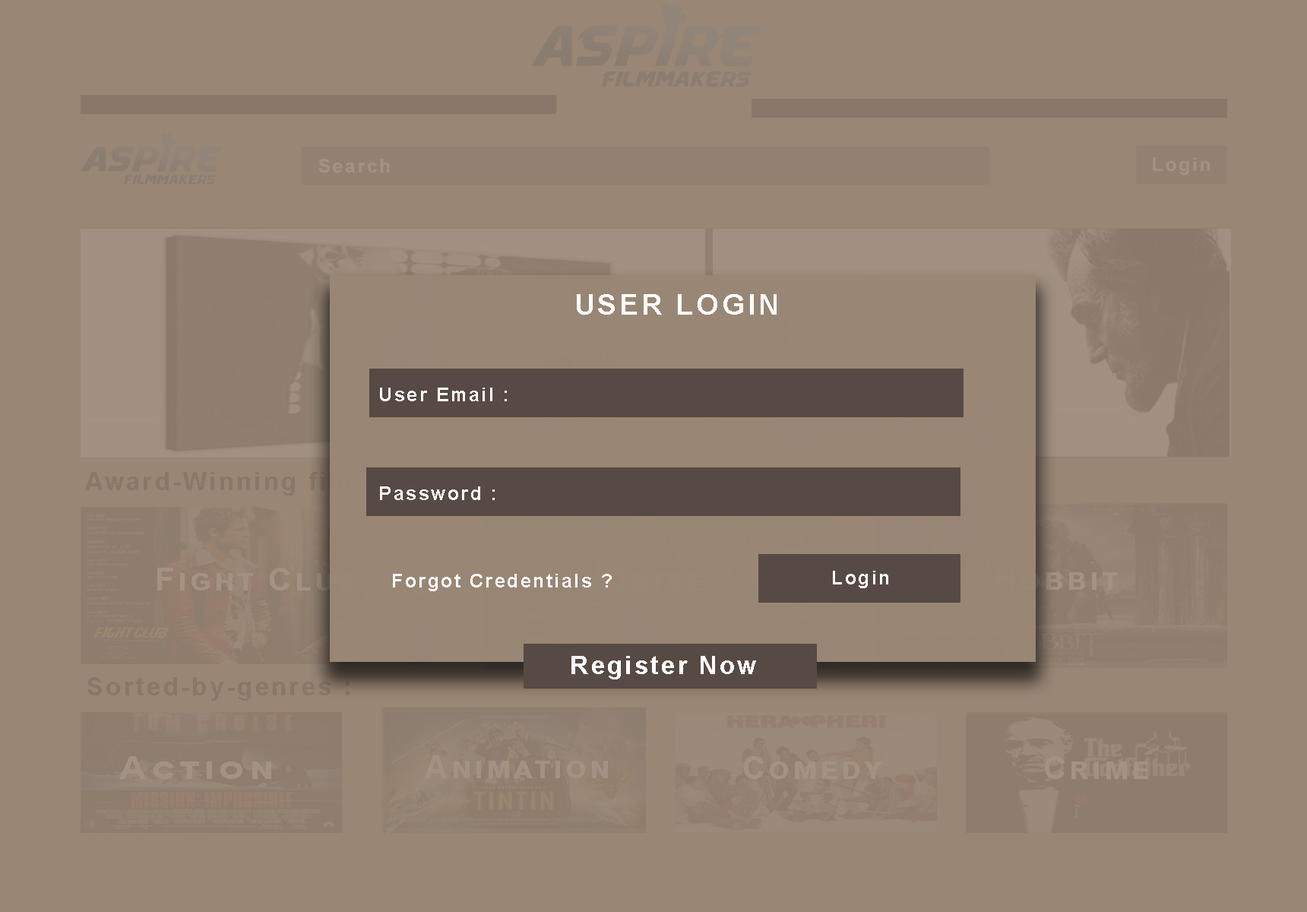
<style>
.page{position:relative;width:1307px;height:912px;background:#998675}
.page>*{position:absolute;margin:0}
.t1{font:19px "Arial-BoldMT";letter-spacing:0.1em;color:#a39283}
.t2{font:28.5px "Arial-BoldMT";letter-spacing:0.1em;color:#ffffff}
.t3{font:19px "Arial-BoldMT";letter-spacing:0.1em;color:#ffffff}
.t4{font:31.7px "Arial-BoldMT";letter-spacing:0.1em;color:#a39283;font-variant:small-caps}
.t5{font:31.7px "Arial-BoldMT";letter-spacing:0.1em;color:#9c8c7d;font-variant:small-caps}
.t6{font:25.3px "Arial-BoldMT";letter-spacing:0.1em;color:#ffffff}
.t7{font:25.3px "Arial-BoldMT";letter-spacing:0.1em;color:#897869}
.t8{font:31.7px "Arial-BoldMT";letter-spacing:0.1em;color:#a39283;font-variant:small-caps;scale:1.25 1}
</style>
<div class="page">
<p class="t1" style="left:318px;top:158px;width:72px;height:15px">Search</p>
<p class="t1" style="left:1153px;top:157px;width:57px;height:19px">Login</p>
<p class="t2" style="left:577px;top:294px;width:200px;height:21px">USER LOGIN</p>
<p class="t3" style="left:380px;top:388px;width:127px;height:13px">User Email :</p>
<p class="t3" style="left:380px;top:486px;width:115px;height:14px">Password :</p>
<p class="t4" style="left:157px;top:568px;width:198px;height:23px">Fight Club</p>
<p class="t5" style="left:996px;top:567px;width:122px;height:23px">Hobbit</p>
<p class="t3" style="left:393px;top:574px;width:219px;height:17px">Forgot Credentials ?</p>
<p class="t3" style="left:833px;top:571px;width:56px;height:17px">Login</p>
<p class="t6" style="left:572px;top:656px;width:184px;height:24px">Register Now</p>
<p class="t7" style="left:87px;top:677px;width:263px;height:24px">Sorted-by-genres :</p>
<p class="t8" style="left:119px;top:756px;width:152px;height:23px">Action</p>
<p class="t4" style="left:425px;top:756px;width:183px;height:22px">Animation</p>
<p class="t4" style="left:744px;top:756px;width:138px;height:23px">Comedy</p>
<p class="t4" style="left:1045px;top:756px;width:103px;height:23px">Crime</p>
</div>
